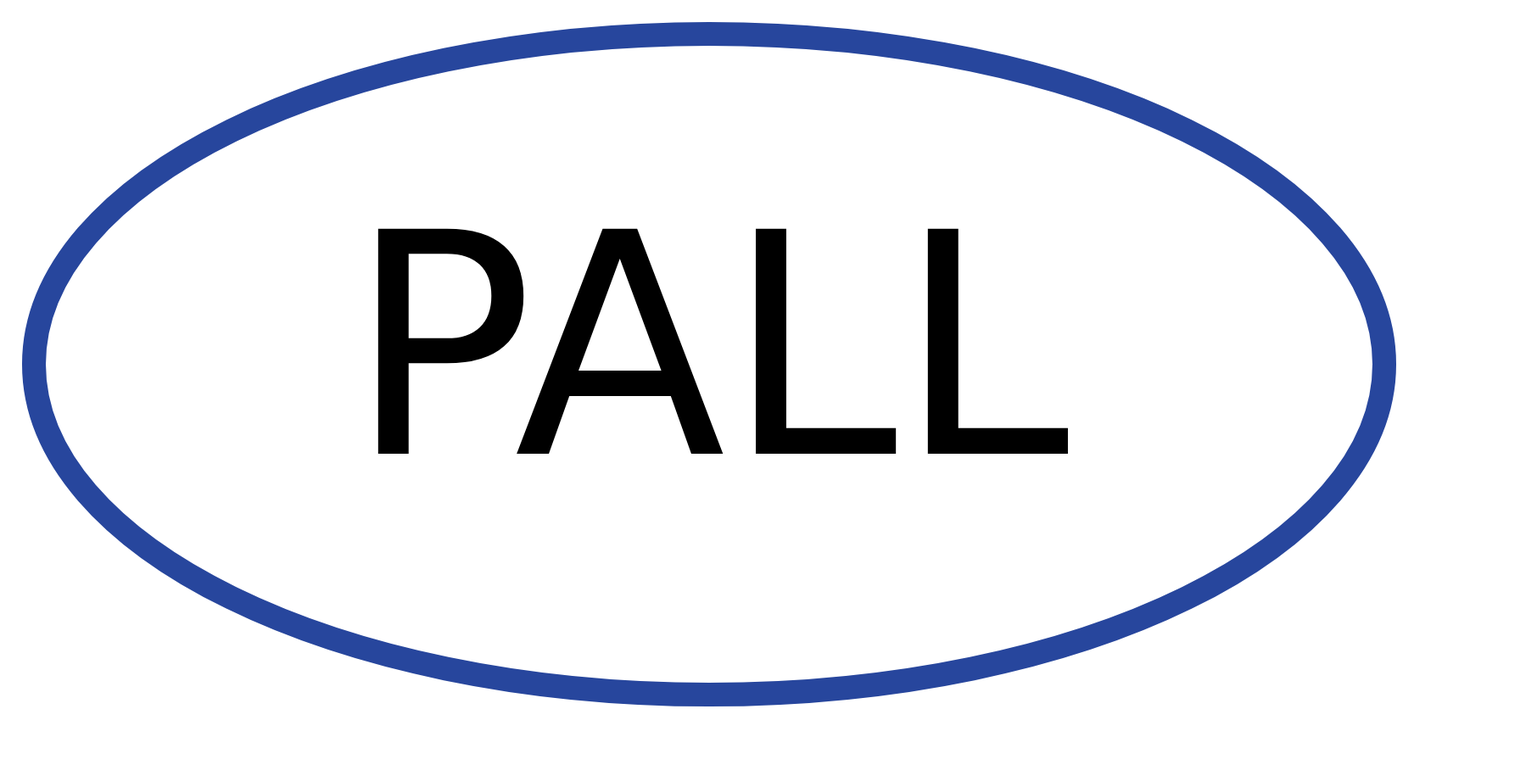
<style>
.page{position:relative;width:1537px;height:776px;background:#ffffff}
.page>*{position:absolute;margin:0}
.t1{font:308.7px "DejaVuSans";color:#000000}
</style>
<div class="page">
<p class="t1" style="left:377px;top:228px;width:691px;height:226px">PALL</p>
</div>
